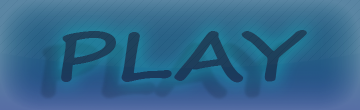
<style>
.page{position:relative;width:360px;height:110px}
.page>*{position:absolute;margin:0}
.t1{font:68.3px "SegoePrint-Bold";color:#1e3f5c;scale:1.31 1}
</style>
<div class="page">
<p class="t1" style="left:61px;top:30px;width:246px;height:53px">PLAY</p>
</div>
